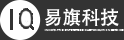
<style>
.page{position:relative;width:124px;height:40px;background:#333333}
.page>*{position:absolute;margin:0}
.t1{font:19px "STHeitiSC-Medium";color:#ffffff}
</style>
<div class="page">
<p class="t1" style="left:45px;top:8px;width:74px;height:18px">易旗科技</p>
</div>
